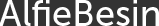
<style>
.page{position:relative;width:159px;height:26px;background:#333333}
.page>*{position:absolute;margin:0}
.t1{font:36px "MuseoSans-500";color:#ffffff}
</style>
<div class="page">
<p class="t1" style="left:0px;top:0px;width:159px;height:26px">AlfieBesin</p>
</div>
